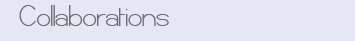
<style>
.page{position:relative;width:355px;height:41px;background:#e5e7f4}
.page>*{position:absolute;margin:0}
.t1{font:30px "Castorgate";color:#6e6e70}
</style>
<div class="page">
<p class="t1" style="left:19px;top:5px;width:150px;height:21px">Collaborations</p>
</div>
